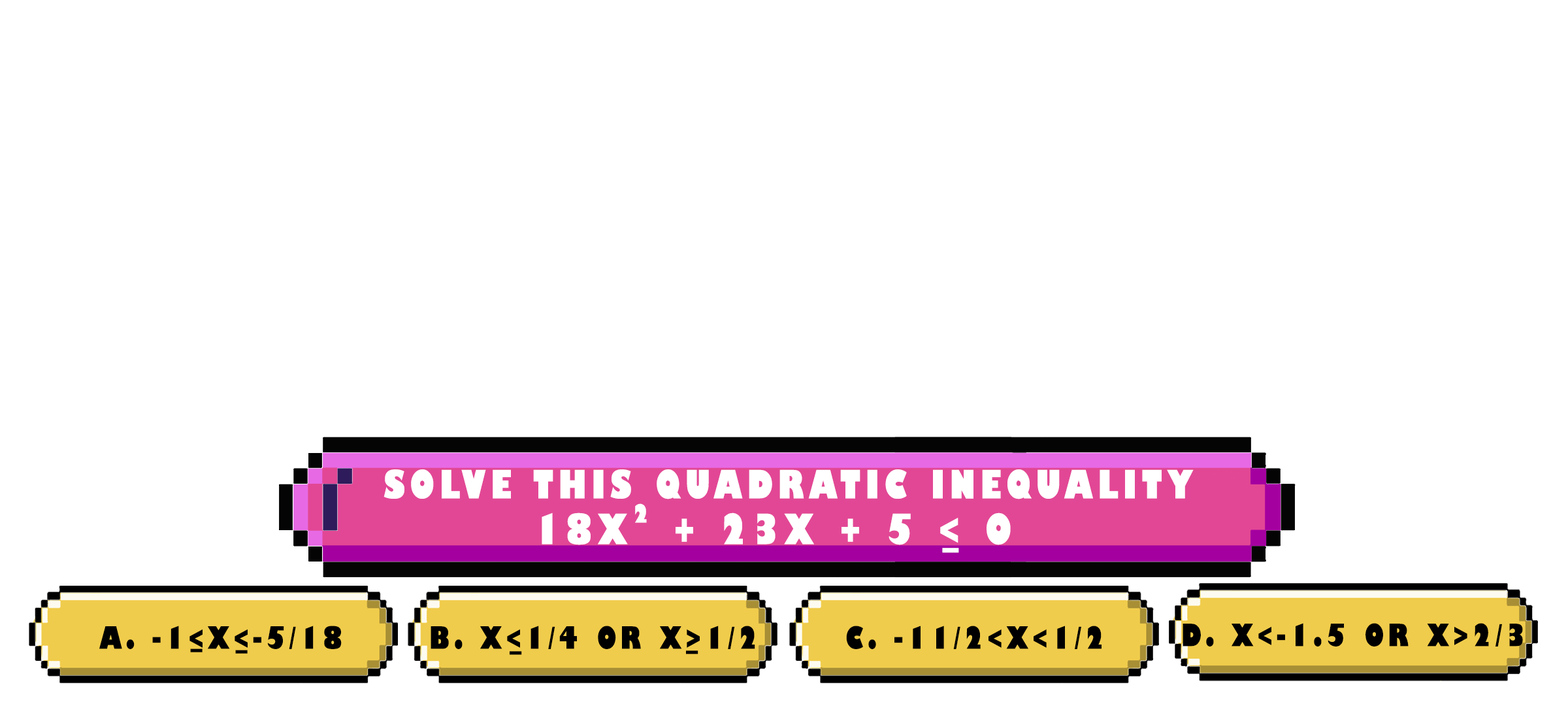
<style>
.page{position:relative;width:1568px;height:706px;background:#ffffff}
.page>*{position:absolute;margin:0}
.t1{font:38.1px "GillSans-UltraBoldCondensed";letter-spacing:0.115em;color:#ffffff;text-transform:uppercase;scale:1.12 1}
.t2{font:24.5px "GillSans-UltraBoldCondensed";letter-spacing:0.115em;color:#ffffff;text-transform:uppercase;scale:1.12 1}
.t3{font:40.8px "GillSans-UltraBoldCondensed";letter-spacing:0.115em;color:#ffffff;text-transform:uppercase;scale:1.12 1}
.t4{font:29.9px "GillSans-UltraBoldCondensed";letter-spacing:0.115em;color:#000000;text-transform:uppercase;scale:1.12 1}
</style>
<div class="page">
<p class="t1" style="left:384px;top:469px;width:810px;height:30px">solve this quadratic inequality</p>
<p class="t2" style="left:635px;top:503px;width:12px;height:20px">2</p>
<p class="t3" style="left:542px;top:512px;width:469px;height:33px">18x  + 23x + 5 &lt; 0</p>
<p class="t3" style="left:942px;top:547px;width:17px;height:6px">_</p>
<p class="t4" style="left:99px;top:625px;width:243px;height:24px">a. -1&lt;x&lt;-5/18</p>
<p class="t4" style="left:431px;top:625px;width:324px;height:24px">b. x&lt;1/4 or x&gt;1/2</p>
<p class="t4" style="left:846px;top:625px;width:256px;height:24px">c. -11/2&lt;x&lt;1/2</p>
<p class="t4" style="left:1183px;top:623px;width:340px;height:23px">d. x&lt;-1.5 or x&gt;2/3</p>
<p class="t4" style="left:190px;top:648px;width:13px;height:4px">_</p>
<p class="t4" style="left:235px;top:649px;width:13px;height:4px">_</p>
<p class="t4" style="left:510px;top:651px;width:12px;height:4px">_</p>
<p class="t4" style="left:686px;top:650px;width:12px;height:4px">_</p>
</div>
